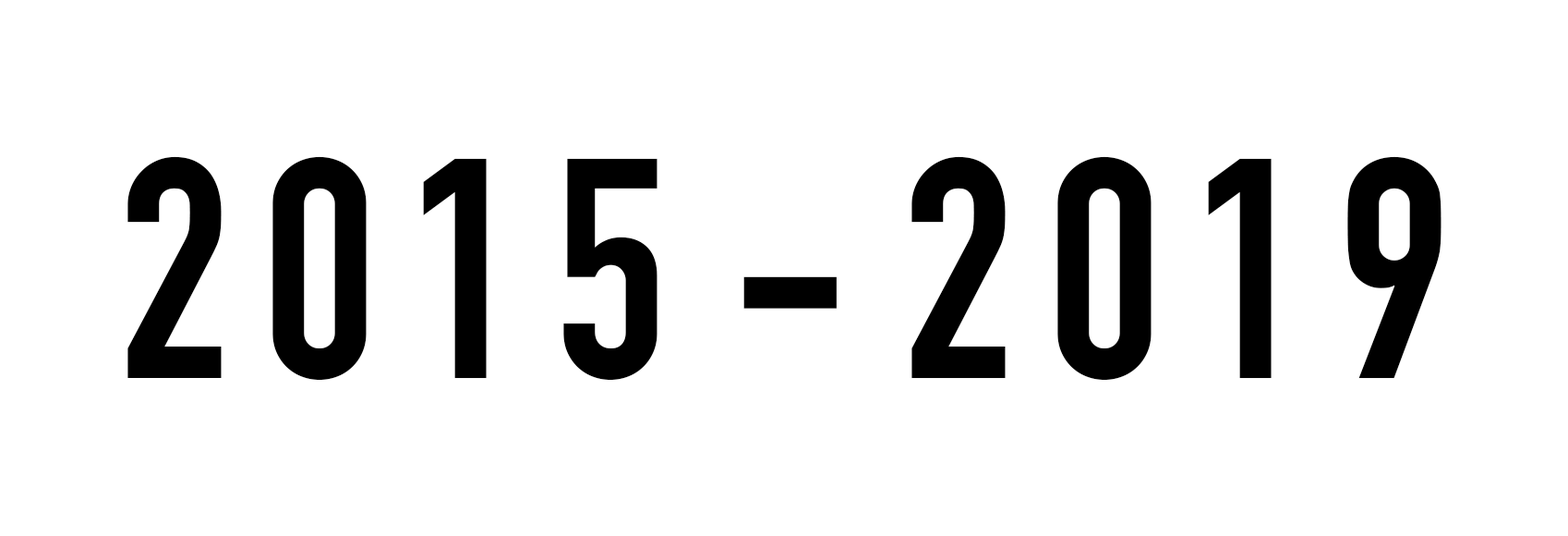
<style>
.page{position:relative;width:1568px;height:536px;background:#ffffff}
.page>*{position:absolute;margin:0}
.t1{font:307.8px "DINCondensed-Bold";letter-spacing:0.1em;color:#000000}
</style>
<div class="page">
<p class="t1" style="left:127px;top:156px;width:1314px;height:224px">2015 - 2019</p>
</div>
